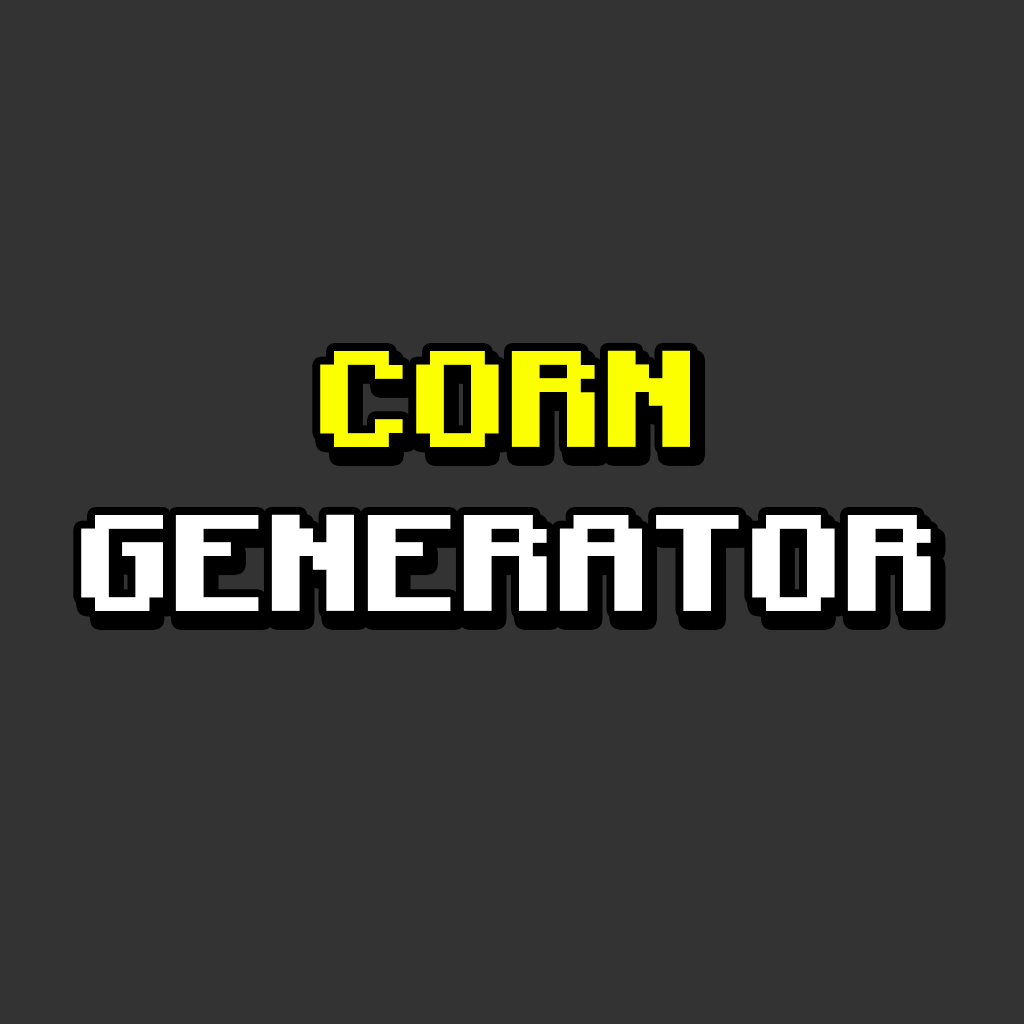
<style>
.page{position:relative;width:1024px;height:1024px;background:#333333}
.page>*{position:absolute;margin:0}
.t1{font:137px "Minecraft-Bold";color:#ffffff}
.t2{font:137px "Minecraft-Bold";color:#fcff00}
</style>
<div class="page">
<p class="t1" style="left:81px;top:350px;width:850px;height:261px;text-align:center"><span class="t2">CORN<br></span>GENERATOR</p>
</div>
